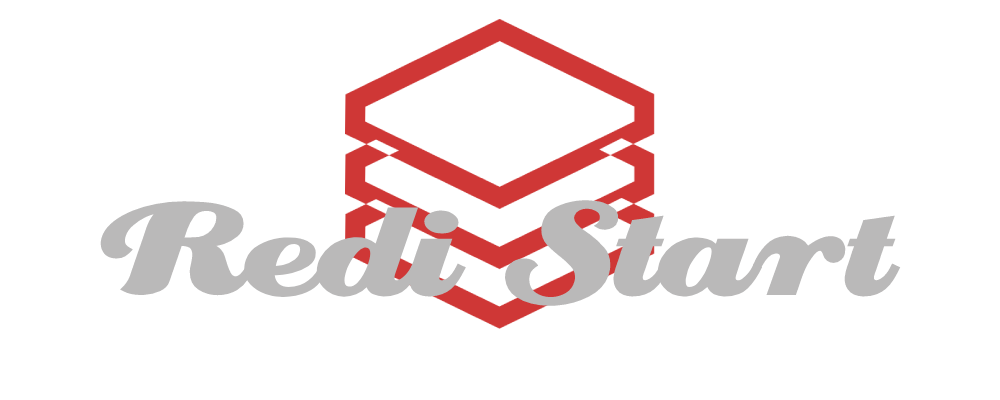
<style>
.page{position:relative;width:1000px;height:400px;background:#ffffff}
.page>*{position:absolute;margin:0}
.t1{font:159px "Creampuff";color:#bab9b9}
</style>
<div class="page">
<p class="t1" style="left:100px;top:200px;width:801px;height:106px">Redi Start</p>
</div>
